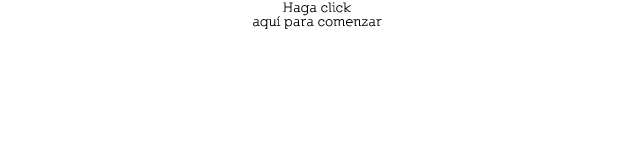
<style>
.page{position:relative;width:633px;height:151px;background:#ffffff}
.page>*{position:absolute;margin:0}
.t1{font:13.9px/14.3px "Nilland-Bold";letter-spacing:0.025em;color:#000000}
</style>
<div class="page">
<p class="t1" style="left:253px;top:2px;width:129px;height:27px;text-align:center">Haga click<br>aquí para comenzar</p>
</div>
